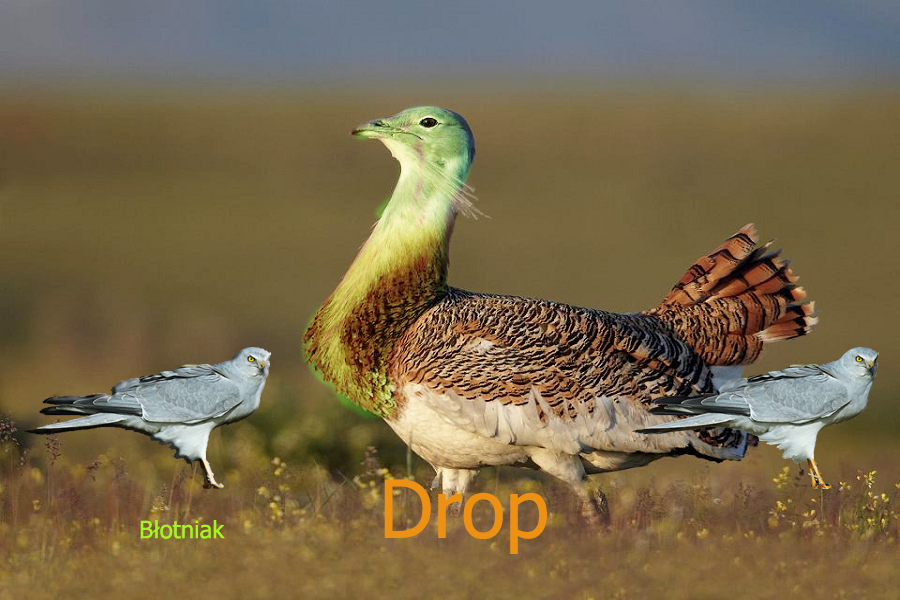
<style>
.page{position:relative;width:900px;height:600px}
.page>*{position:absolute;margin:0}
.t1{font:80px "Tahoma";color:#ed9112}
.t2{font:24px "Tahoma";color:#a7f41e}
</style>
<div class="page">
<p class="t1" style="left:384px;top:479px;width:163px;height:75px">Drop</p>
<p class="t2" style="left:140px;top:520px;width:85px;height:19px">Błotniak</p>
</div>
